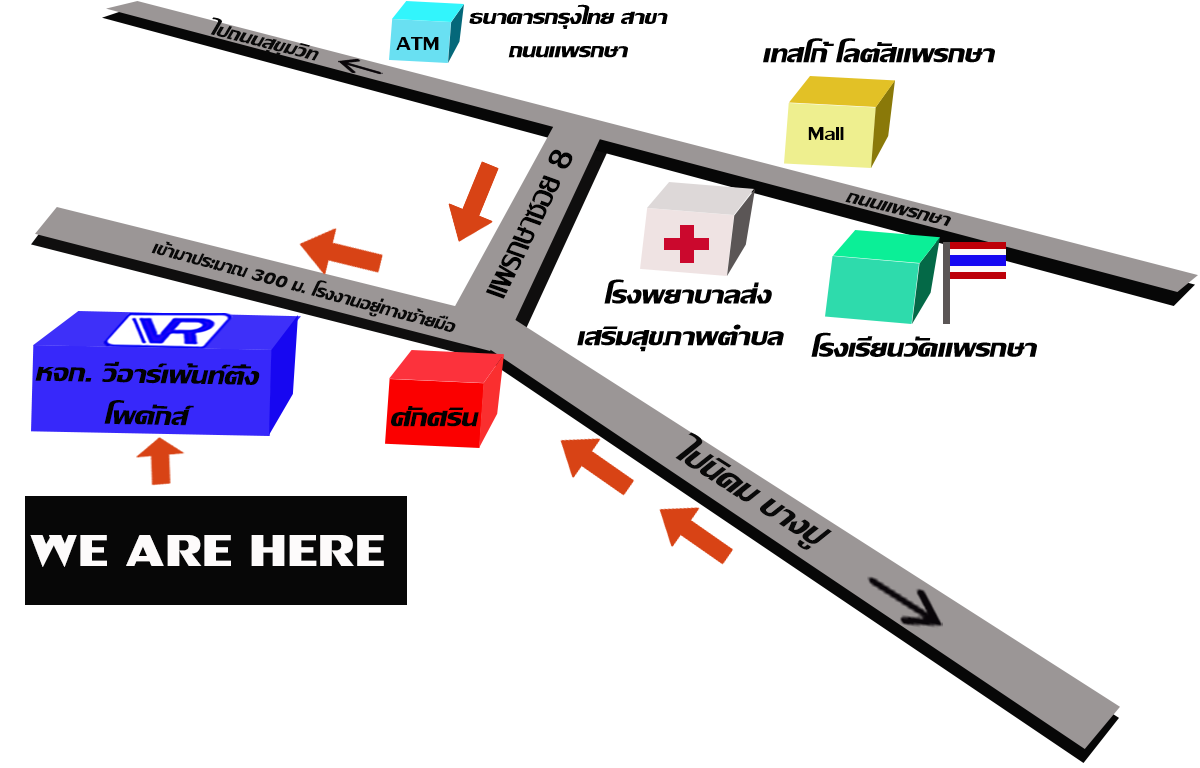
<style>
.page{position:relative;width:1200px;height:768px;background:#ffffff}
.page>*{position:absolute;margin:0}
.t1{font:27.8px "LilyUPCBoldItalic";color:#010101;scale:1.17 1}
.t2{font:25.4px "LilyUPCBoldItalic";color:#090909;scale:1.14 1}
.t3{font:27.8px "LilyUPC";color:#010101;scale:1.17 1}
.t4{font:34.7px "LilyUPCBoldItalic";color:#010101;scale:1.17 1}
.t5{font:47.8px "LilyUPC";color:#010101;scale:0.9 1}
.t6{font:25.3px "LilyUPCBoldItalic";color:#090909;scale:1.14 1}
.t7{font:25px "LilyUPCBoldItalic";color:#090909}
.t8{font:44.7px "LilyUPCBoldItalic";color:#090909;scale:1.03 1}
.t9{font:66.7px "LilyUPCBold";color:#fdfbfb;scale:1.17 1}
</style>
<div class="page">
<p class="t1" style="left:469px;top:4px;width:199px;height:54px;text-align:center">ธนาคารกรุงไทย สาขา<br>ถนนแพรกษา</p>
<p class="t2" style="left:210px;top:17px;width:109px;height:44px;rotate:14deg">ไปถนนสุขุมวิท</p>
<p class="t3" style="left:396px;top:37px;width:43px;height:13px">ATM</p>
<p class="t4" style="left:763px;top:38px;width:232px;height:25px">เทสโก้ โลตัสแพรกษา</p>
<p class="t3" style="left:808px;top:127px;width:36px;height:13px">Mall</p>
<p class="t5" style="left:485px;top:149px;width:88px;height:150px;rotate:-64deg">แพรกษาซอย 8</p>
<p class="t6" style="left:845px;top:192px;width:106px;height:35px;rotate:14deg">ถนนแพรกษา</p>
<p class="t7" style="left:151px;top:241px;width:305px;height:91px;rotate:15deg">เข้ามาประมาณ 300 ม. โรงงานอยู่ทางซ้ายมือ</p>
<p class="t4" style="left:577px;top:279px;width:207px;height:73px;text-align:center">โรงพยาบาลส่งเสริมสุขภาพตำบล</p>
<p class="t4" style="left:811px;top:332px;width:226px;height:25px">โรงเรียนวัดแพรกษา</p>
<p class="t4" style="left:35px;top:361px;width:225px;height:65px;rotate:1deg">หจก. วีอาร์เพ้นท์ติ้ง โพดักส์</p>
<p class="t4" style="left:391px;top:406px;width:88px;height:21px">ศักศริน</p>
<p class="t8" style="left:675px;top:432px;width:157px;height:118px;rotate:33deg">ไปนิคม บางปู</p>
<p class="t9" style="left:30px;top:535px;width:354px;height:32px">WE ARE HERE</p>
</div>
